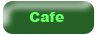
<style>
.page{position:relative;width:97px;height:35px;background:#276027}
.page>*{position:absolute;margin:0}
.t1{font:14px "Arial-Black";color:#66ff66}
</style>
<div class="page">
<p class="t1" style="left:27px;top:10px;width:57px;height:19px">Cafe</p>
</div>
